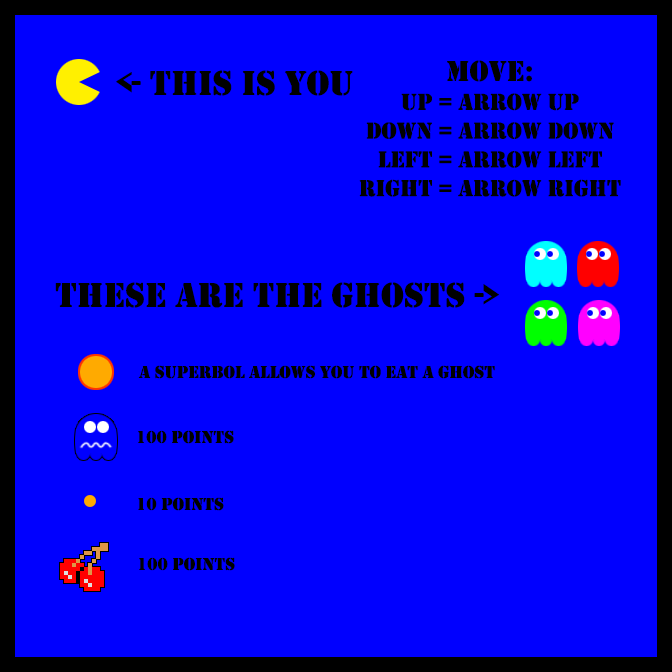
<style>
.page{position:relative;width:672px;height:672px;background:#0000ff}
.page>*{position:absolute;margin:0}
.t1{font:24px "Stencil";color:#000000}
.t2{font:30px "Stencil";color:#000000}
.t3{font:36px "Stencil";color:#000000}
.t4{font:18px "Stencil";color:#000000}
</style>
<div class="page">
<p class="t1" style="left:359px;top:60px;width:262px;height:137px;text-align:center"><span class="t2">move:<br></span>up = Arrow up<br>Down = arrow down<br>left = arrow left<br>right = arrow right</p>
<p class="t3" style="left:116px;top:70px;width:237px;height:26px">&lt;- this is you</p>
<p class="t3" style="left:55px;top:282px;width:444px;height:26px">these are the ghosts -&gt;</p>
<p class="t4" style="left:138px;top:365px;width:357px;height:14px">a SUperbol allows you to eat a ghost</p>
<p class="t4" style="left:138px;top:430px;width:96px;height:14px">100 points</p>
<p class="t4" style="left:138px;top:497px;width:86px;height:14px">10 points</p>
<p class="t4" style="left:139px;top:557px;width:96px;height:14px">100 points</p>
</div>
